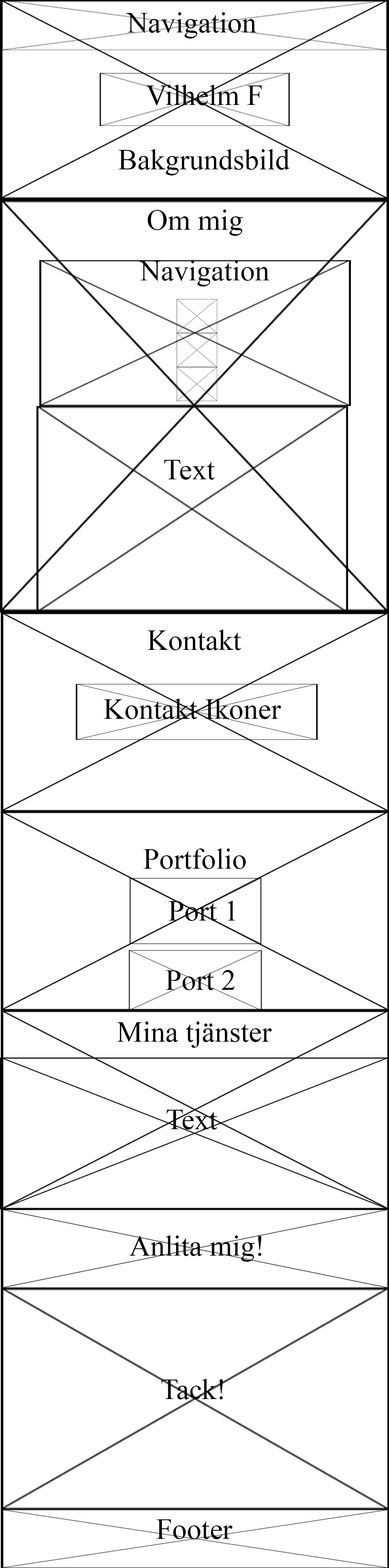
<style>
.page{position:relative;width:389px;height:1568px;background:#ffffff}
.page>*{position:absolute;margin:0}
.t1{font:29.2px "TimesNewRomanPSMT";color:#000000}
</style>
<div class="page">
<p class="t1" style="left:126px;top:12px;width:130px;height:26px">Navigation</p>
<p class="t1" style="left:146px;top:85px;width:116px;height:20px">Vilhelm F</p>
<p class="t1" style="left:118px;top:149px;width:172px;height:26px">Bakgrundsbild</p>
<p class="t1" style="left:147px;top:209px;width:96px;height:27px">Om mig</p>
<p class="t1" style="left:139px;top:260px;width:130px;height:26px">Navigation</p>
<p class="t1" style="left:164px;top:460px;width:51px;height:20px">Text</p>
<p class="t1" style="left:147px;top:630px;width:94px;height:20px">Kontakt</p>
<p class="t1" style="left:104px;top:699px;width:177px;height:20px">Kontakt Ikoner</p>
<p class="t1" style="left:143px;top:848px;width:103px;height:21px">Portfolio</p>
<p class="t1" style="left:169px;top:901px;width:66px;height:20px">Port 1</p>
<p class="t1" style="left:166px;top:970px;width:69px;height:20px">Port 2</p>
<p class="t1" style="left:117px;top:1021px;width:155px;height:27px">Mina tjänster</p>
<p class="t1" style="left:167px;top:1110px;width:50px;height:20px">Text</p>
<p class="t1" style="left:129px;top:1235px;width:132px;height:27px">Anlita mig!</p>
<p class="t1" style="left:161px;top:1379px;width:62px;height:20px">Tack!</p>
<p class="t1" style="left:156px;top:1519px;width:77px;height:20px">Footer</p>
</div>
